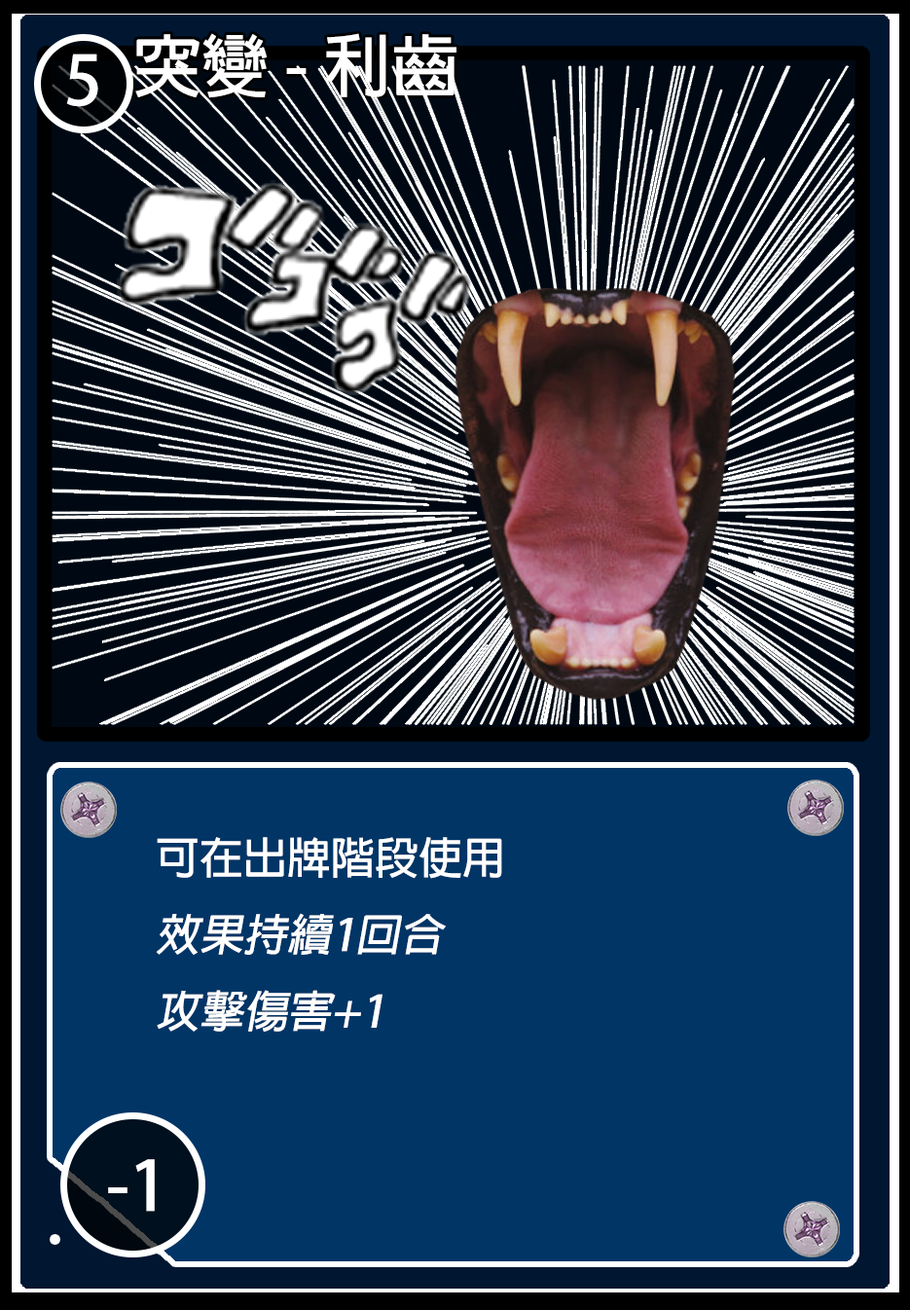
<style>
.page{position:relative;width:910px;height:1310px;background:#003566}
.page>*{position:absolute;margin:0}
.t1{font:68.1px "AdobeFanHeitiStd-Bold";color:#ffffff}
.t2{font:67.8px "AdobeFanHeitiStd-Bold";color:#ffffff}
.t3{font:43.8px "AdobeFanHeitiStd-Bold";color:#ffffff;font-style:italic}
.t4{font:43.8px "AdobeFanHeitiStd-Bold";color:#ffffff}
</style>
<div class="page">
<p class="t1" style="left:135px;top:33px;width:322px;height:65px">突變 - 利齒</p>
<p class="t2" style="left:66px;top:54px;width:32px;height:53px">5</p>
<p class="t3" style="left:156px;top:837px;width:346px;height:195px"><span class="t4">可在出牌階段使用<br></span>效果持續1回合<br>攻擊傷害+1</p>
<p class="t1" style="left:108px;top:1159px;width:47px;height:53px">-1</p>
</div>
